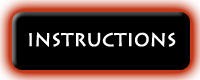
<style>
.page{position:relative;width:200px;height:80px;background:#000000}
.page>*{position:absolute;margin:0}
.t1{font:18px "LithosPro-Regular";color:#ffffff;font-weight:bold}
</style>
<div class="page">
<p class="t1" style="left:29px;top:32px;width:147px;height:15px">INSTRUCTIONS</p>
</div>
